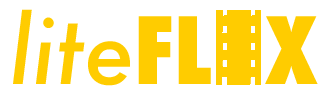
<style>
.page{position:relative;width:330px;height:97px;background:#ffffff}
.page>*{position:absolute;margin:0}
.t1{font:90px "Futura-CondensedExtraBold";color:#ffcc00}
.t2{font:90px "Futura-MediumItalic";color:#ffcc00}
</style>
<div class="page">
<p class="t1" style="left:13px;top:9px;width:305px;height:77px"><span class="t2">lite</span>FL  X</p>
</div>
